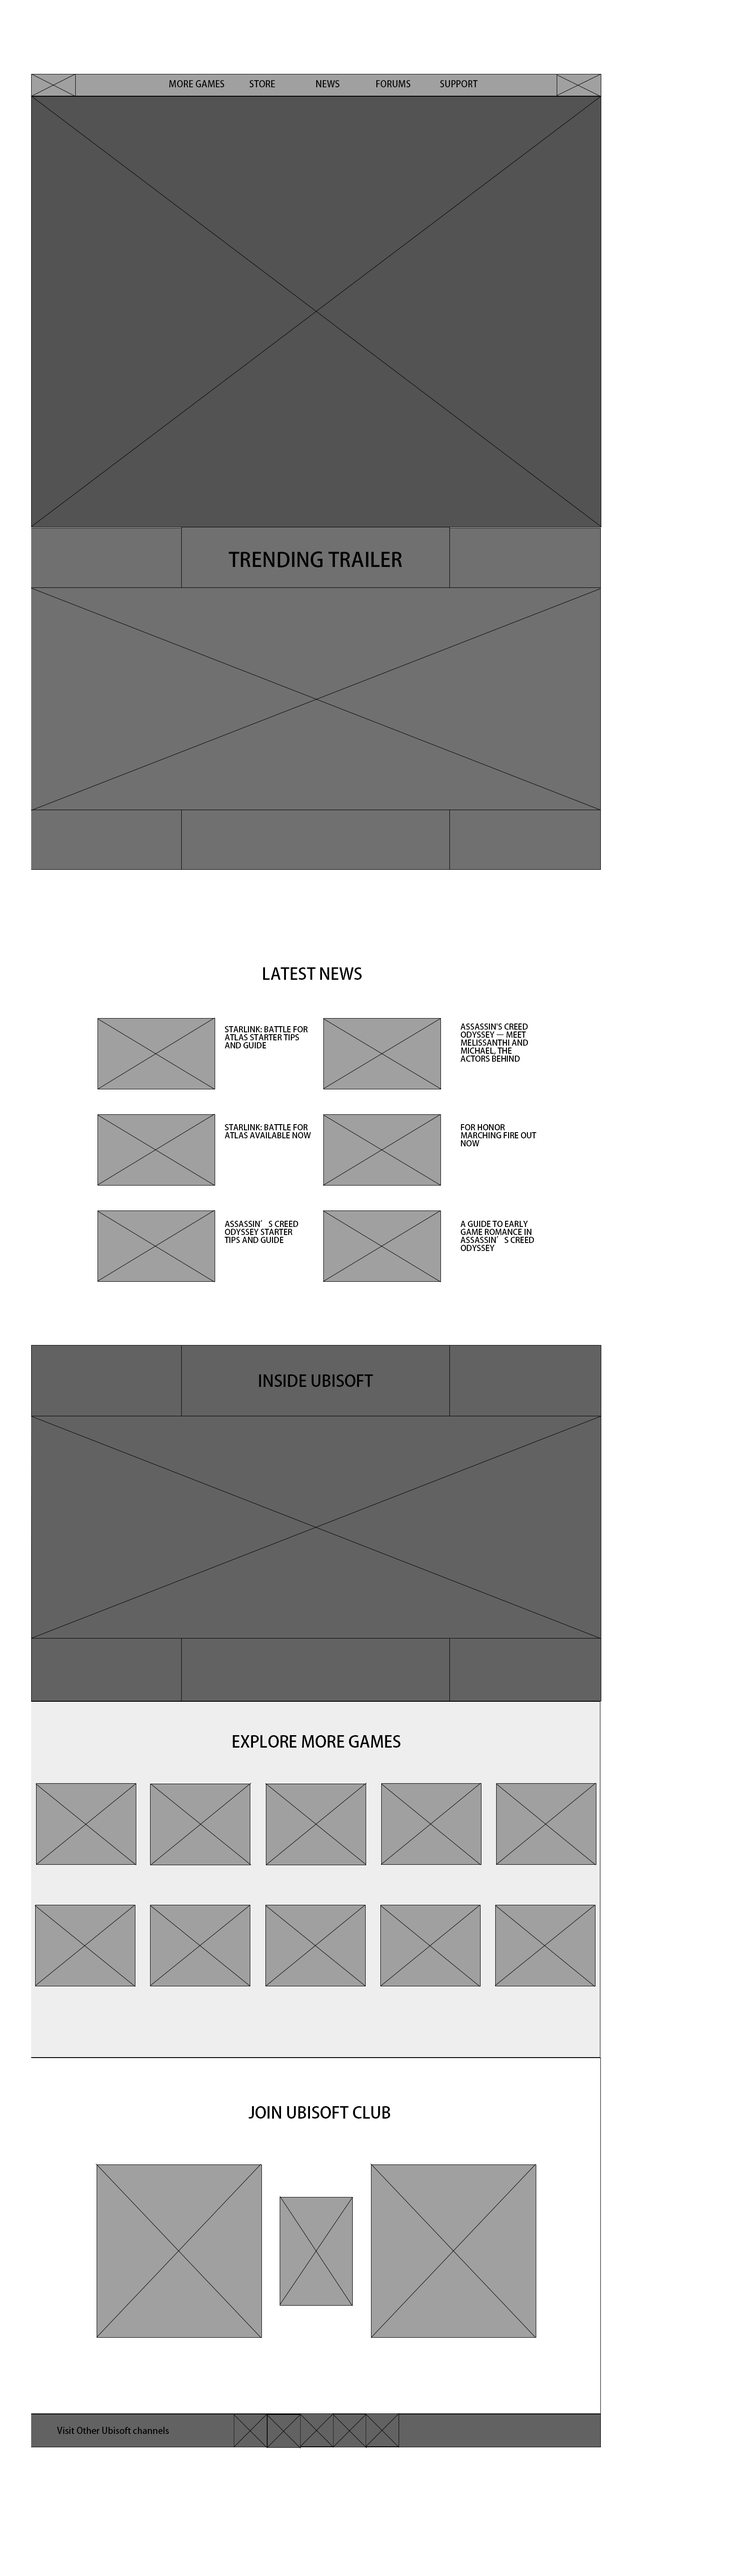
<style>
.page{position:relative;width:734px;height:2576px;background:#ffffff}
.page>*{position:absolute;margin:0}
.t1{font:8.9px "AdobeFanHeitiStd-Bold";color:#000000}
.t2{font:8px "AdobeFanHeitiStd-Bold";color:#000000}
.t3{font:20px "AdobeFanHeitiStd-Bold";color:#000000}
.t4{font:16px "AdobeFanHeitiStd-Bold";color:#000000}
.t5{font:8px/8px "AdobeFanHeitiStd-Bold";color:#000000}
.t6{font:8px/2.7px "AdobeFanHeitiStd-Bold";color:#000000}
.t7{font:12.5px "AdobeFanHeitiStd-Bold";color:#000000}
</style>
<div class="page">
<p class="t1" style="left:169px;top:80px;width:55px;height:7px"><span class="t2"><br><br><br></span>MORE GAMES</p>
<p class="t1" style="left:249px;top:80px;width:26px;height:7px"><span class="t2"><br><br><br></span>STORE</p>
<p class="t1" style="left:316px;top:80px;width:23px;height:7px"><span class="t2"><br><br><br></span>NEWS</p>
<p class="t1" style="left:376px;top:80px;width:35px;height:7px"><span class="t2"><br><br><br></span>FORUMS</p>
<p class="t1" style="left:440px;top:80px;width:38px;height:7px"><span class="t2"><br><br><br></span>SUPPORT</p>
<p class="t3" style="left:228px;top:551px;width:174px;height:16px">TRENDING TRAILER</p>
<p class="t4" style="left:263px;top:967px;width:99px;height:13px">LATEST NEWS</p>
<p class="t5" style="left:461px;top:1023px;width:67px;height:39px">ASSASSIN'S CREED ODYSSEY – MEET MELISSANTHI AND MICHAEL, THE ACTORS BEHIND KASSANDRA AND ALEXIOS</p>
<p class="t5" style="left:224px;top:1026px;width:84px;height:22px;text-align:center"><span class="t6"><br></span>STARLINK: BATTLE FOR ATLAS STARTER TIPS AND GUIDE</p>
<p class="t5" style="left:224px;top:1124px;width:87px;height:14px">STARLINK: BATTLE FOR ATLAS AVAILABLE NOW</p>
<p class="t5" style="left:461px;top:1124px;width:76px;height:22px">FOR HONOR MARCHING FIRE OUT NOW</p>
<p class="t5" style="left:224px;top:1220px;width:74px;height:23px">ASSASSIN’S CREED ODYSSEY STARTER TIPS AND GUIDE</p>
<p class="t5" style="left:461px;top:1221px;width:73px;height:30px">A GUIDE TO EARLY GAME ROMANCE IN ASSASSIN’S CREED ODYSSEY</p>
<p class="t4" style="left:259px;top:1374px;width:114px;height:13px">INSIDE UBISOFT</p>
<p class="t4" style="left:232px;top:1735px;width:168px;height:13px">EXPLORE MORE GAMES</p>
<p class="t4" style="left:249px;top:2106px;width:141px;height:13px">JOIN UBISOFT CLUB</p>
<p class="t1" style="left:57px;top:2427px;width:112px;height:7px"><span class="t7"><br><br><br><br><br></span>Visit Other Ubisoft channels</p>
</div>
